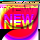
<style>
.page{position:relative;width:40px;height:40px}
.page>*{position:absolute;margin:0}
.t1{font:13px "HelveticaNeue-Bold"}
</style>
<div class="page">
<p class="t1" style="left:4px;top:15px;width:30px;height:9px">NEW</p>
</div>
